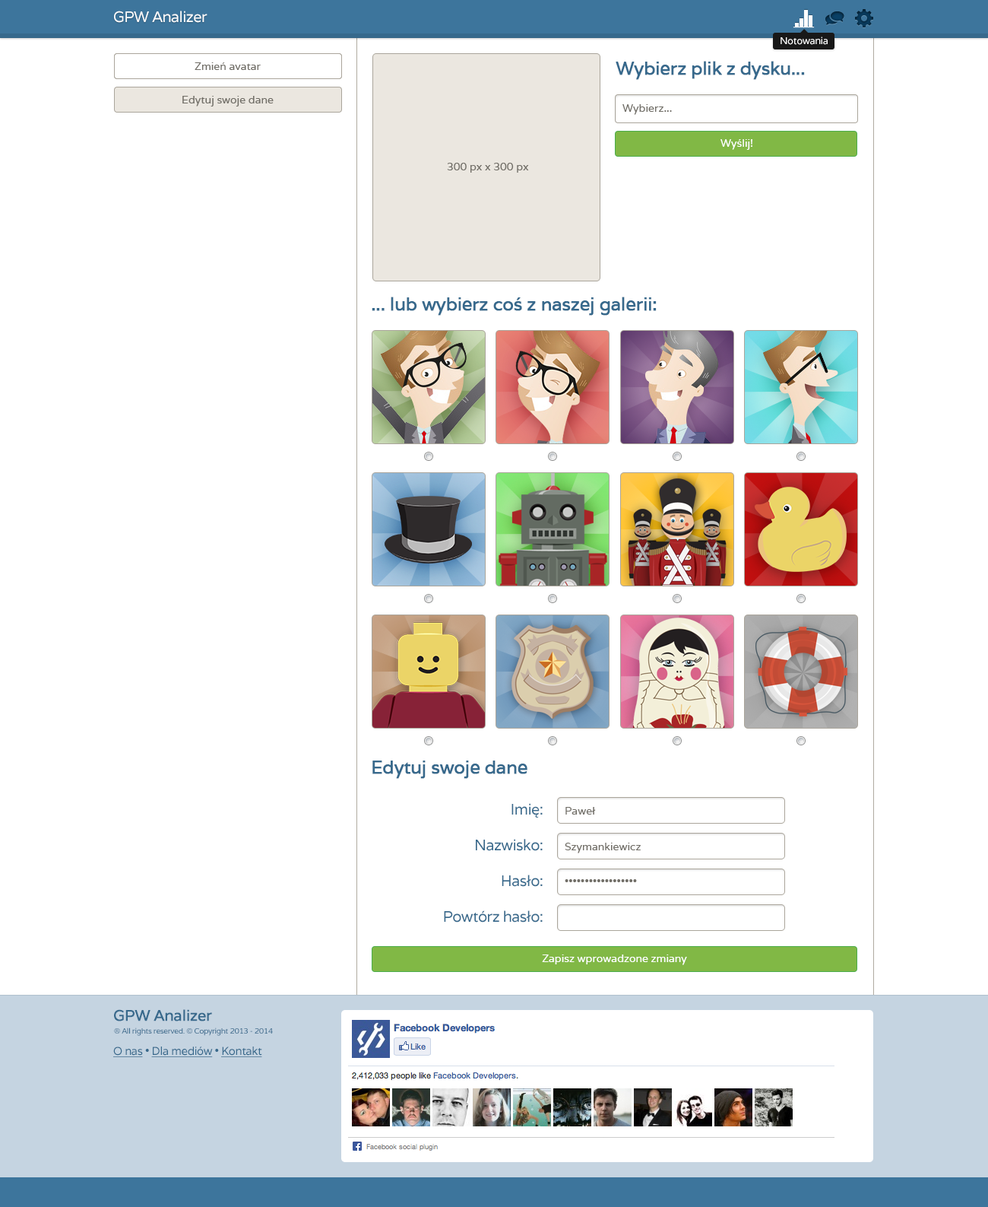
<style>
.page{position:relative;width:988px;height:1207px;background:#ffffff}
.page>*{position:absolute;margin:0}
.t1{font:15.2px "Varela";letter-spacing:-0.03em;color:#ffffff}
.t2{font:9.9px "Varela";letter-spacing:-0.03em;color:#ffffff}
.t3{font:10.6px "Varela";color:#716e67}
.t4{font:18.2px "Varela";letter-spacing:-0.03em;color:#37698c;font-weight:bold}
.t5{font:10.6px "Varela";color:#ffffff}
.t6{font:15.2px "Varela";letter-spacing:-0.03em;color:#37698c}
.t7{font:15.2px "Varela";letter-spacing:-0.03em;color:#37698c;font-weight:bold}
.t8{font:7.6px "Varela";letter-spacing:-0.03em;color:#37698c}
.t9{font:11.4px "Varela";letter-spacing:-0.03em;color:#37698c;text-decoration:underline}
.t10{font:11.4px "Varela";letter-spacing:-0.03em;color:#37698c}
</style>
<div class="page">
<p class="t1" style="left:114px;top:11px;width:94px;height:12px">GPW Analizer</p>
<p class="t2" style="left:781px;top:36px;width:47px;height:9px">Notowania</p>
<p class="t3" style="left:195px;top:62px;width:66px;height:8px">Zmień avatar</p>
<p class="t3" style="left:195px;top:62px;width:66px;height:8px">Zmień avatar</p>
<p class="t4" style="left:616px;top:61px;width:189px;height:19px">Wybierz plik z dysku...</p>
<p class="t3" style="left:182px;top:96px;width:92px;height:10px">Edytuj swoje dane</p>
<p class="t3" style="left:623px;top:104px;width:49px;height:11px">Wybierz...</p>
<p class="t5" style="left:721px;top:139px;width:32px;height:11px">Wyślij!</p>
<p class="t3" style="left:447px;top:163px;width:82px;height:10px">300 px x 300 px</p>
<p class="t4" style="left:372px;top:296px;width:285px;height:20px">... lub wybierz coś z naszej galerii:</p>
<p class="t4" style="left:373px;top:760px;width:155px;height:18px">Edytuj swoje dane</p>
<p class="t6" style="left:512px;top:803px;width:31px;height:14px">Imię:</p>
<p class="t3" style="left:566px;top:807px;width:30px;height:7px">Paweł</p>
<p class="t6" style="left:476px;top:839px;width:67px;height:12px">Nazwisko:</p>
<p class="t3" style="left:565px;top:842px;width:76px;height:11px">Szymankiewicz</p>
<p class="t6" style="left:502px;top:874px;width:41px;height:12px">Hasło:</p>
<p class="t3" style="left:565px;top:879px;width:72px;height:3px">••••••••••••••••••</p>
<p class="t6" style="left:444px;top:910px;width:99px;height:12px">Powtórz hasło:</p>
<p class="t5" style="left:542px;top:954px;width:145px;height:11px">Zapisz wprowadzone zmiany</p>
<p class="t7" style="left:114px;top:1009px;width:98px;height:12px">GPW Analizer</p>
<p class="t8" style="left:114px;top:1027px;width:159px;height:8px">® All rights reserved. © Copyright 2013 - 2014</p>
<p class="t9" style="left:113px;top:1046px;width:149px;height:11px">O nas<span class="t10"> • </span>Dla mediów<span class="t10"> • </span>Kontakt</p>
</div>
